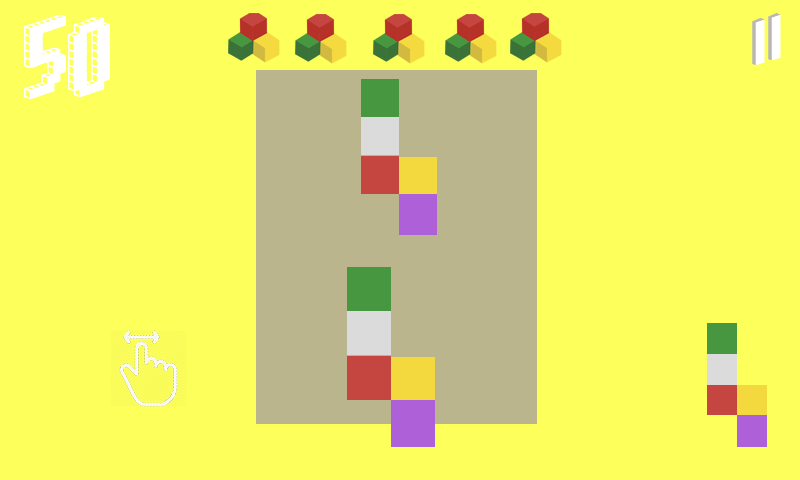
<style>
.page{position:relative;width:800px;height:480px;background:#fdff5a}
.page>*{position:absolute;margin:0}
.t1{font:89px "Blox-(BRK";color:#ffffff}
</style>
<div class="page">
<p class="t1" style="left:24px;top:15px;width:86px;height:84px">50</p>
</div>
